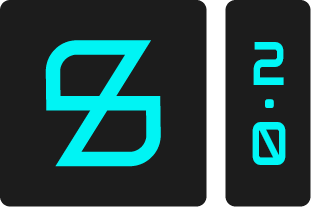
<style>
.page{position:relative;width:315px;height:207px;background:#1c1c1c}
.page>*{position:absolute;margin:0}
.t1{font:61.6px "Squired-Regular";color:#00f7f7}
</style>
<div class="page">
<p class="t1" style="left:253px;top:42px;width:31px;height:43px">2</p>
<p class="t1" style="left:265px;top:99px;width:9px;height:9px">.</p>
<p class="t1" style="left:252px;top:122px;width:34px;height:43px">0</p>
</div>
